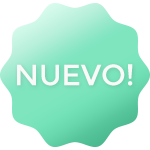
<style>
.page{position:relative;width:150px;height:150px;background:#ffffff}
.page>*{position:absolute;margin:0}
.t1{font:29.2px "Montserrat-Regular";color:#faf9f9;text-transform:uppercase}
.t2{font:29.2px "Montserrat-Regular";color:#faf9f9}
</style>
<div class="page">
<p class="t1" style="left:17px;top:64px;width:116px;height:22px">Nuevo<span class="t2">!</span></p>
</div>
